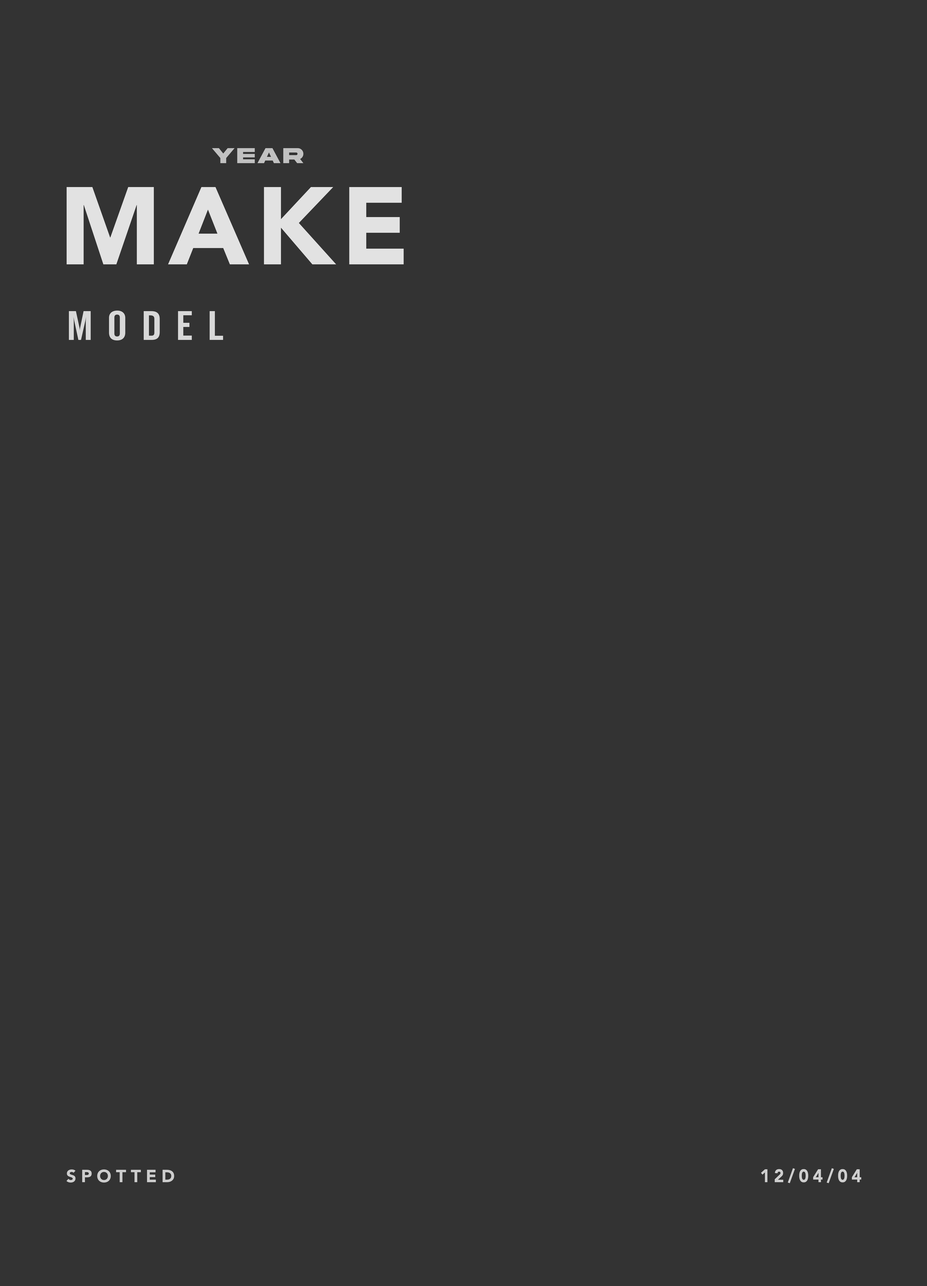
<style>
.page{position:relative;width:927px;height:1286px;background:#333333}
.page>*{position:absolute;margin:0}
.t1{font:22.8px "AkiraExpanded-SuperBold";letter-spacing:0.1em;color:#c1c1c1}
.t2{font:109px "AvenirLTStd-Black";letter-spacing:0.06em;color:#ebebeb}
.t3{font:40.8px "AlternateGothicNo2BT-Regular";letter-spacing:0.28em;color:#d8d8d8;scale:1.19 1}
.t4{font:17.4px "AvenirLTStd-Black";letter-spacing:0.26em;color:#cdcdcd}
.t5{font:18.3px "AvenirLTStd-Black";letter-spacing:0.22em;color:#e5e5e5;scale:0.94 1}
</style>
<div class="page">
<p class="t1" style="left:212px;top:148px;width:92px;height:15px">YEAR</p>
<p class="t2" style="left:67px;top:187px;width:337px;height:77px">MAKE</p>
<p class="t3" style="left:69px;top:311px;width:154px;height:30px">MODEL</p>
<p class="t4" style="left:66px;top:1169px;width:108px;height:14px">SPOTTED</p>
<p class="t5" style="left:761px;top:1168px;width:101px;height:15px;opacity:0.87">12/04/04</p>
</div>
